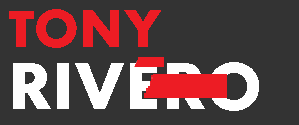
<style>
.page{position:relative;width:299px;height:125px;background:#333333}
.page>*{position:absolute;margin:0}
.t1{font:48px "FuturaMaxiCGBold";color:#ed1c24}
.t2{font:60px "FuturaMaxiCGBold";color:#ffffff}
</style>
<div class="page">
<p class="t1" style="left:9px;top:9px;width:152px;height:39px">TONY</p>
<p class="t2" style="left:13px;top:62px;width:246px;height:49px">RIVERO</p>
</div>
